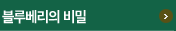
<style>
.page{position:relative;width:176px;height:31px;background:#136346}
.page>*{position:absolute;margin:0}
.t1{font:14px "SDGothicNeoa-gBd";letter-spacing:-0.05em;color:#ffffff;scale:0.95 1}
</style>
<div class="page">
<p class="t1" style="left:2px;top:10px;width:84px;height:14px">블루베리의 비밀</p>
</div>
